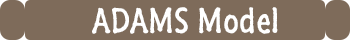
<style>
.page{position:relative;width:350px;height:40px;background:#7e6b5a}
.page>*{position:absolute;margin:0}
.t1{font:36px "SegoeMarker";color:#ffffff}
</style>
<div class="page">
<p class="t1" style="left:92px;top:7px;width:186px;height:27px">ADAMS Model</p>
</div>
